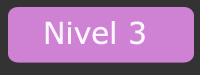
<style>
.page{position:relative;width:200px;height:75px;background:#cf81d4}
.page>*{position:absolute;margin:0}
.t1{font:30px "Verdana";color:#fbf6fb}
</style>
<div class="page">
<p class="t1" style="left:45px;top:21px;width:100px;height:24px">Nivel 3</p>
</div>
